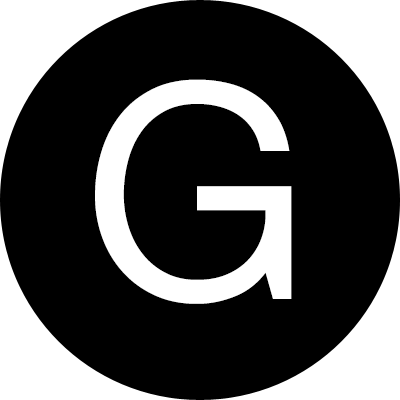
<style>
.page{position:relative;width:400px;height:400px;background:#000000}
.page>*{position:absolute;margin:0}
.t1{font:300px "HelveticaNeue";letter-spacing:0.036em;color:#ffffff}
</style>
<div class="page">
<p class="t1" style="left:95px;top:79px;width:197px;height:225px">G</p>
</div>
